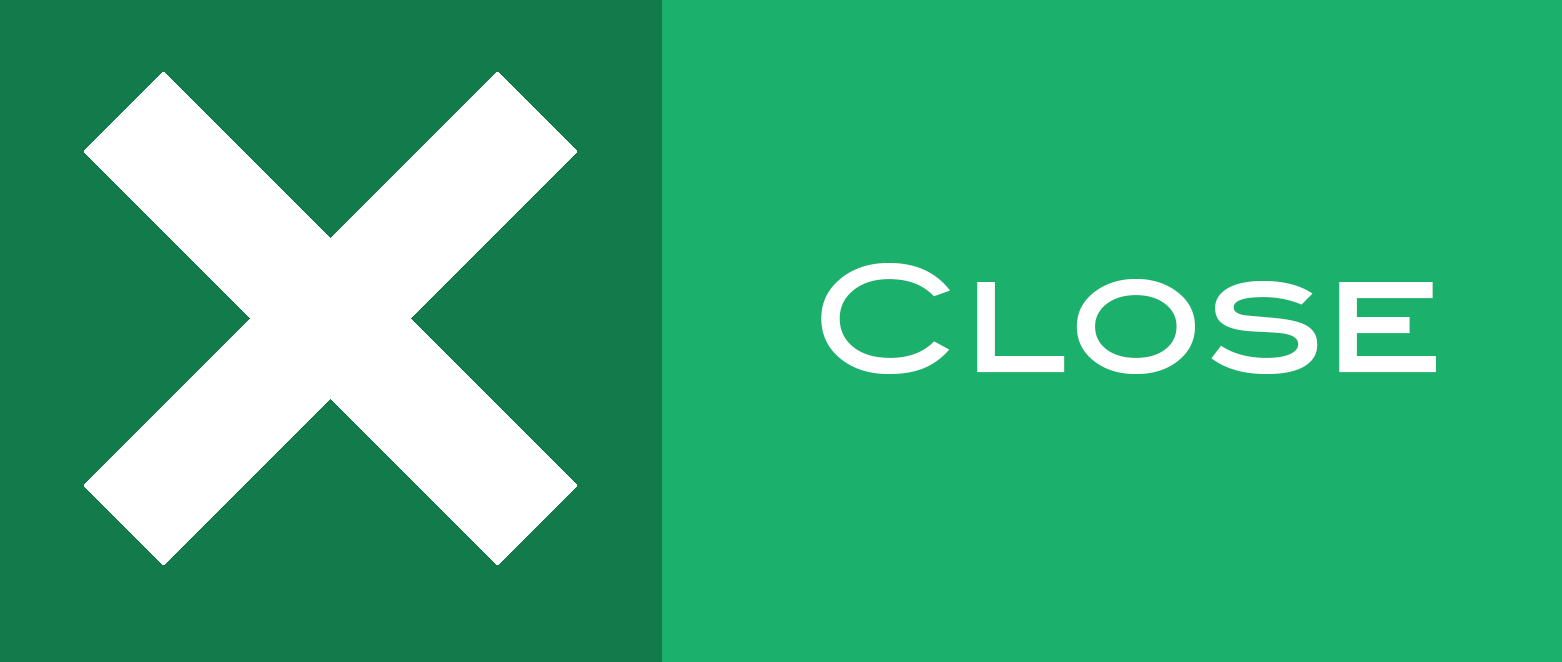
<style>
.page{position:relative;width:1562px;height:662px;background:#1bb06b}
.page>*{position:absolute;margin:0}
.t1{font:145.8px "BlairMdITCTTMedium";color:#ffffff}
</style>
<div class="page">
<p class="t1" style="left:821px;top:263px;width:615px;height:111px">Close</p>
</div>
